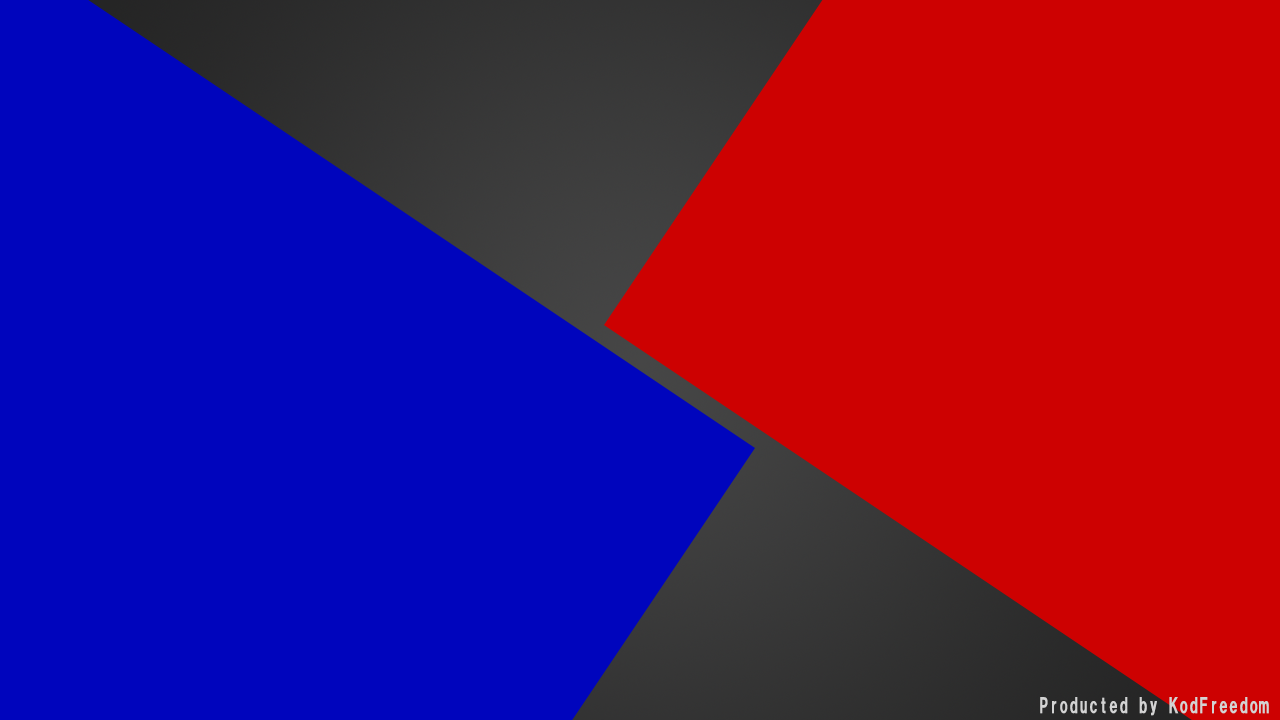
<style>
.page{position:relative;width:1280px;height:720px;background:#0005bd}
.page>*{position:absolute;margin:0}
.t1{font:20px "HGSoeiKakugothicUB";color:#d3d3d3}
</style>
<div class="page">
<p class="t1" style="left:1040px;top:697px;width:229px;height:19px">Producted by KodFreedom</p>
</div>
